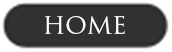
<style>
.page{position:relative;width:172px;height:52px;background:#323031}
.page>*{position:absolute;margin:0}
.t1{font:24px "TrajanPro-Regular";color:#ffffff}
</style>
<div class="page">
<p class="t1" style="left:44px;top:16px;width:81px;height:18px">HOME</p>
</div>
